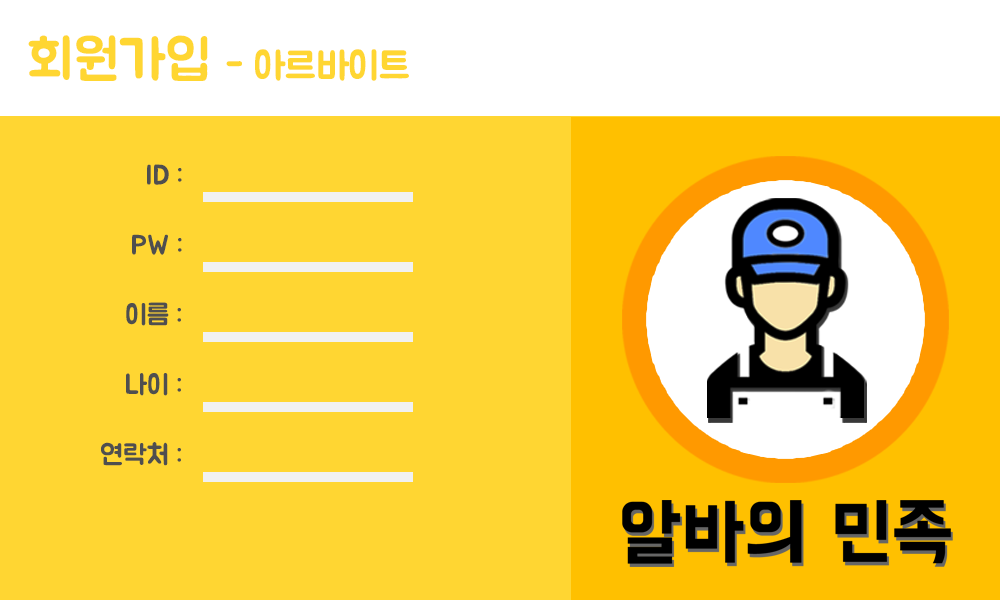
<style>
.page{position:relative;width:1000px;height:600px;background:#ffd632}
.page>*{position:absolute;margin:0}
.t1{font:55.6px "BMJUA";color:#ffd632}
.t2{font:38.9px "BMJUA";color:#ffd632}
.t3{font:27.8px "BMJUA";color:#4f4f4f}
</style>
<div class="page">
<p class="t1" style="left:28px;top:35px;width:180px;height:46px">회원가입</p>
<p class="t2" style="left:226px;top:49px;width:183px;height:32px">- 아르바이트</p>
<p class="t3" style="left:147px;top:164px;width:35px;height:21px">ID :</p>
<p class="t3" style="left:132px;top:234px;width:50px;height:21px">PW :</p>
<p class="t3" style="left:126px;top:302px;width:55px;height:24px">이름 :</p>
<p class="t3" style="left:126px;top:373px;width:55px;height:23px">나이 :</p>
<p class="t3" style="left:101px;top:442px;width:80px;height:24px">연락처 :</p>
</div>
